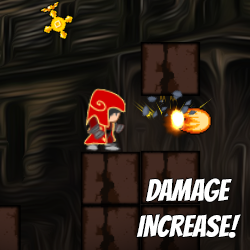
<style>
.page{position:relative;width:250px;height:250px}
.page>*{position:absolute;margin:0}
.t1{font:30px "Bangers-Regular";color:#ffffff}
</style>
<div class="page">
<p class="t1" style="left:136px;top:178px;width:105px;height:60px;text-align:center">Damage<br>INcrease!</p>
</div>
